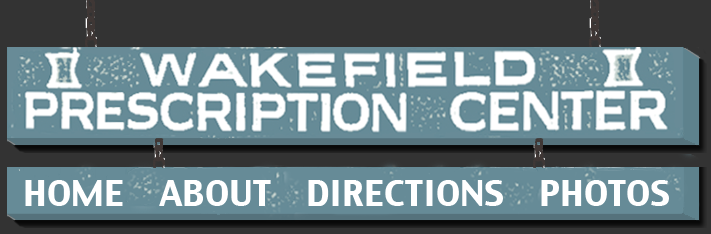
<style>
.page{position:relative;width:711px;height:234px;background:#333333}
.page>*{position:absolute;margin:0}
.t1{font:35px "CharcoalCY";color:#ffffff}
</style>
<div class="page">
<p class="t1" style="left:25px;top:180px;width:644px;height:26px">HOME    ABOUT    DIRECTIONS    PHOTOS</p>
</div>
